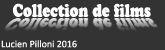
<style>
.page{position:relative;width:165px;height:50px;background:#333333}
.page>*{position:absolute;margin:0}
.t1{font:18px "CooperBlackStd";color:#fefefe;scale:0.77 1}
.t2{font:10px "Calibri";color:#ffffff}
</style>
<div class="page">
<p class="t1" style="left:13px;top:3px;width:138px;height:14px">Collection de films</p>
<p class="t2" style="left:1px;top:40px;width:76px;height:8px">Lucien Pilloni 2016</p>
</div>
